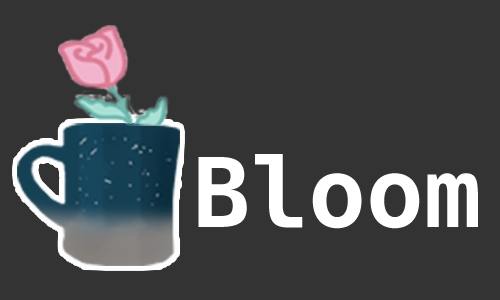
<style>
.page{position:relative;width:500px;height:300px;background:#333333}
.page>*{position:absolute;margin:0}
.t1{font:96px "Hack-Bold";color:#ffffff}
</style>
<div class="page">
<p class="t1" style="left:198px;top:154px;width:280px;height:75px">Bloom</p>
</div>
